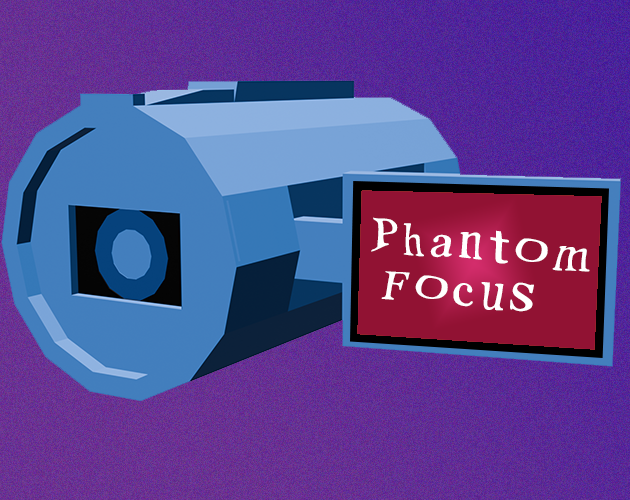
<style>
.page{position:relative;width:630px;height:500px}
.page>*{position:absolute;margin:0}
.t1{font:61px/48px "PositionsByArixbored-Regular";color:#ffffff}
</style>
<div class="page">
<p class="t1" style="left:371px;top:217px;width:219px;height:95px;rotate:6deg">Phantom<br> Focus</p>
</div>
